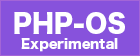
<style>
.page{position:relative;width:140px;height:56px;background:#8752dc}
.page>*{position:absolute;margin:0}
.t1{font:25px "HiraKakuStd-W8";color:#ffffff}
.t2{font:12.5px "HiraKakuStd-W8";color:#ffffff}
</style>
<div class="page">
<p class="t1" style="left:14px;top:12px;width:111px;height:22px">PHP-OS</p>
<p class="t2" style="left:21px;top:38px;width:97px;height:14px">Experimental</p>
</div>
